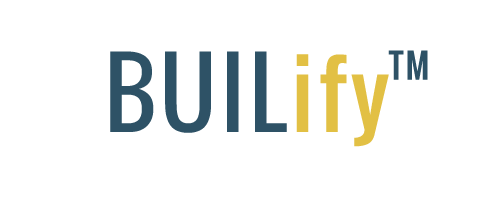
<style>
.page{position:relative;width:500px;height:200px;background:#ffffff}
.page>*{position:absolute;margin:0}
.t1{font:92px "Oswald";letter-spacing:0.05em;color:#2e5266}
.t2{font:92px "Oswald";letter-spacing:0.05em;color:#e2c044}
.t3{font:33px "Oswald";letter-spacing:0.05em;color:#2e5266;font-weight:bold}
</style>
<div class="page">
<p class="t1" style="left:110px;top:51px;width:279px;height:96px">BUIL<span class="t2">ify</span></p>
<p class="t3" style="left:388px;top:50px;width:40px;height:30px">TM</p>
</div>
